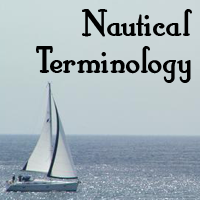
<style>
.page{position:relative;width:200px;height:200px}
.page>*{position:absolute;margin:0}
.t1{font:39.2px/36.7px "HobbyHorse";color:#000000}
</style>
<div class="page">
<p class="t1" style="left:36px;top:9px;width:156px;height:74px;text-align:right">Nautical<br>Terminology</p>
</div>
